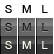
<style>
.page{position:relative;width:54px;height:54px;background:#ffffff}
.page>*{position:absolute;margin:0}
.t1{font:11px "HelveticaNeue";letter-spacing:0.025em;color:#000000}
.t2{font:11px "HelveticaNeue";letter-spacing:0.025em;color:#131314}
.t3{font:11px "HelveticaNeue";letter-spacing:0.025em;color:#262628}
.t4{font:11px "HelveticaNeue";letter-spacing:0.025em;color:#131415}
.t5{font:11px "HelveticaNeue";letter-spacing:0.025em;color:#faf9ec}
</style>
<div class="page">
<p class="t1" style="left:5px;top:5px;width:7px;height:8px">S</p>
<p class="t1" style="left:22px;top:5px;width:9px;height:8px">M</p>
<p class="t1" style="left:42px;top:5px;width:6px;height:8px">L</p>
<p class="t2" style="left:5px;top:23px;width:7px;height:8px">S</p>
<p class="t3" style="left:22px;top:23px;width:9px;height:8px">M</p>
<p class="t4" style="left:42px;top:23px;width:6px;height:8px">L</p>
<p class="t5" style="left:5px;top:41px;width:7px;height:8px">S</p>
<p class="t5" style="left:22px;top:41px;width:9px;height:8px">M</p>
<p class="t5" style="left:42px;top:41px;width:6px;height:8px">L</p>
</div>
